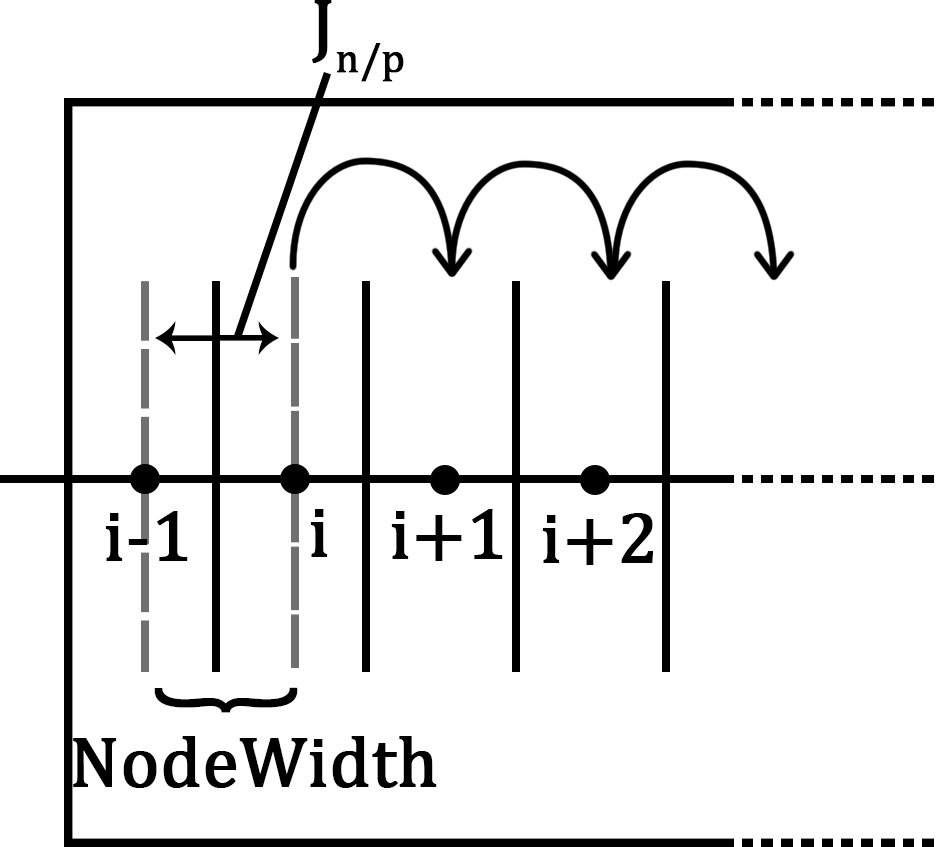
<style>
.page{position:relative;width:938px;height:847px;background:#ffffff}
.page>*{position:absolute;margin:0}
.t1{font:72px "CambriaMath";color:#000000;font-weight:bold}
.t2{font:150.7px "CambriaMath";color:#000000;font-weight:bold;scale:0.48 1}
</style>
<div class="page">
<p class="t1" style="left:312px;top:0px;width:92px;height:82px">Jn/p</p>
<p class="t1" style="left:310px;top:509px;width:18px;height:48px">i</p>
<p class="t1" style="left:391px;top:509px;width:112px;height:52px">i+1</p>
<p class="t1" style="left:105px;top:511px;width:83px;height:50px">i-1</p>
<p class="t1" style="left:542px;top:513px;width:111px;height:52px">i+2</p>
<p class="t2" style="left:154px;top:687px;width:144px;height:26px;rotate:-90deg">{</p>
<p class="t1" style="left:73px;top:736px;width:364px;height:52px">NodeWidth</p>
</div>
